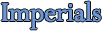
<style>
.page{position:relative;width:102px;height:31px;background:#ffffff}
.page>*{position:absolute;margin:0}
.t1{font:30px "Perpetua";color:#6c98d9}
</style>
<div class="page">
<p class="t1" style="left:1px;top:1px;width:100px;height:29px">Imperials</p>
</div>
